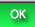
<style>
.page{position:relative;width:35px;height:27px}
.page>*{position:absolute;margin:0}
.t1{font:12.5px "MyriadPro-Regular";color:#ffffff}
</style>
<div class="page">
<p class="t1" style="left:10px;top:9px;width:16px;height:10px">OK</p>
</div>
